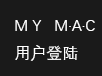
<style>
.page{position:relative;width:102px;height:76px;background:#1a1a1a}
.page>*{position:absolute;margin:0}
.t1{font:16px "DengXian-Regular";color:#ffffff;text-transform:uppercase}
</style>
<div class="page">
<p class="t1" style="left:15px;top:20px;width:80px;height:41px">M Y   M·A·C<br>用户登陆</p>
</div>
